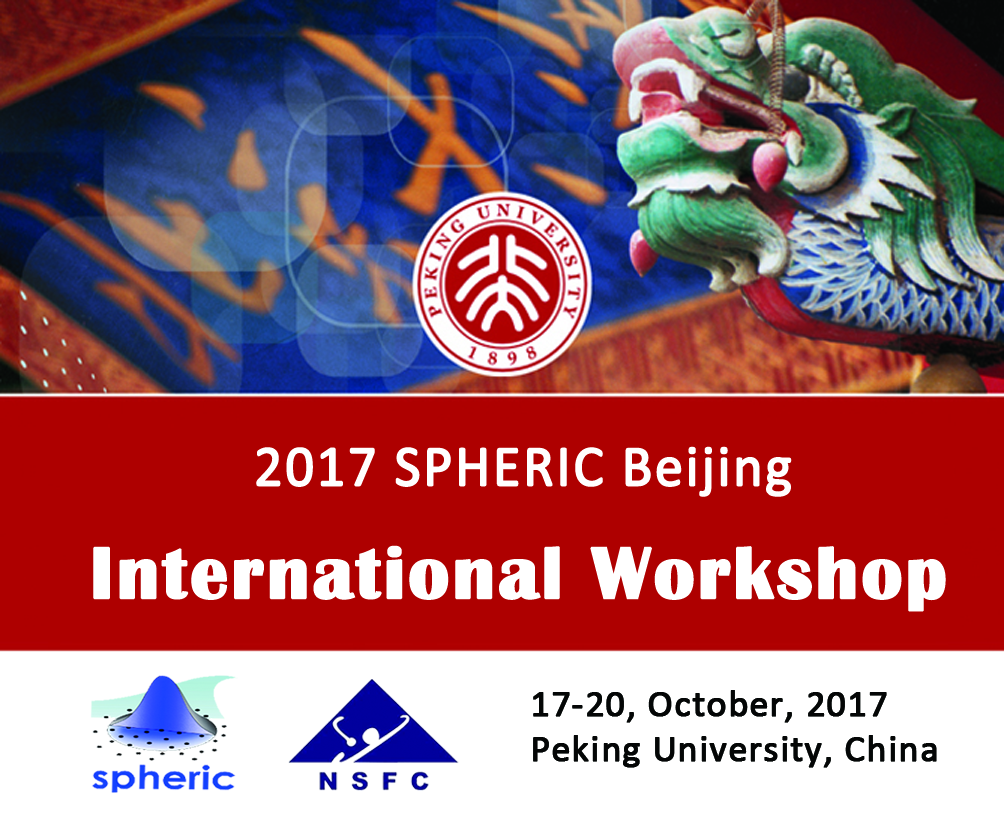
<style>
.page{position:relative;width:1004px;height:814px;background:#ae0000}
.page>*{position:absolute;margin:0}
.t1{font:58.3px "Calibri";letter-spacing:0.02em;color:#ffffff;font-weight:bold;scale:0.97 1}
.t2{font:75px "BritannicBold";letter-spacing:0.02em;color:#ffffff;font-weight:bold}
.t3{font:37.5px "Calibri";letter-spacing:0.02em;color:#040606;font-weight:bold}
</style>
<div class="page">
<p class="t1" style="left:256px;top:446px;width:536px;height:51px">2017 SPHERIC Beijing</p>
<p class="t2" style="left:93px;top:545px;width:853px;height:67px">International Workshop</p>
<p class="t3" style="left:533px;top:690px;width:404px;height:78px">17-20, October, 2017<br>Peking University, China</p>
</div>
